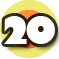
<style>
.page{position:relative;width:59px;height:59px;background:#ffffff}
.page>*{position:absolute;margin:0}
.t1{font:37.4px "GillSans-UltraBold";letter-spacing:-0.2em;color:#ffffff}
</style>
<div class="page">
<p class="t1" style="left:4px;top:16px;width:51px;height:28px">20</p>
</div>
